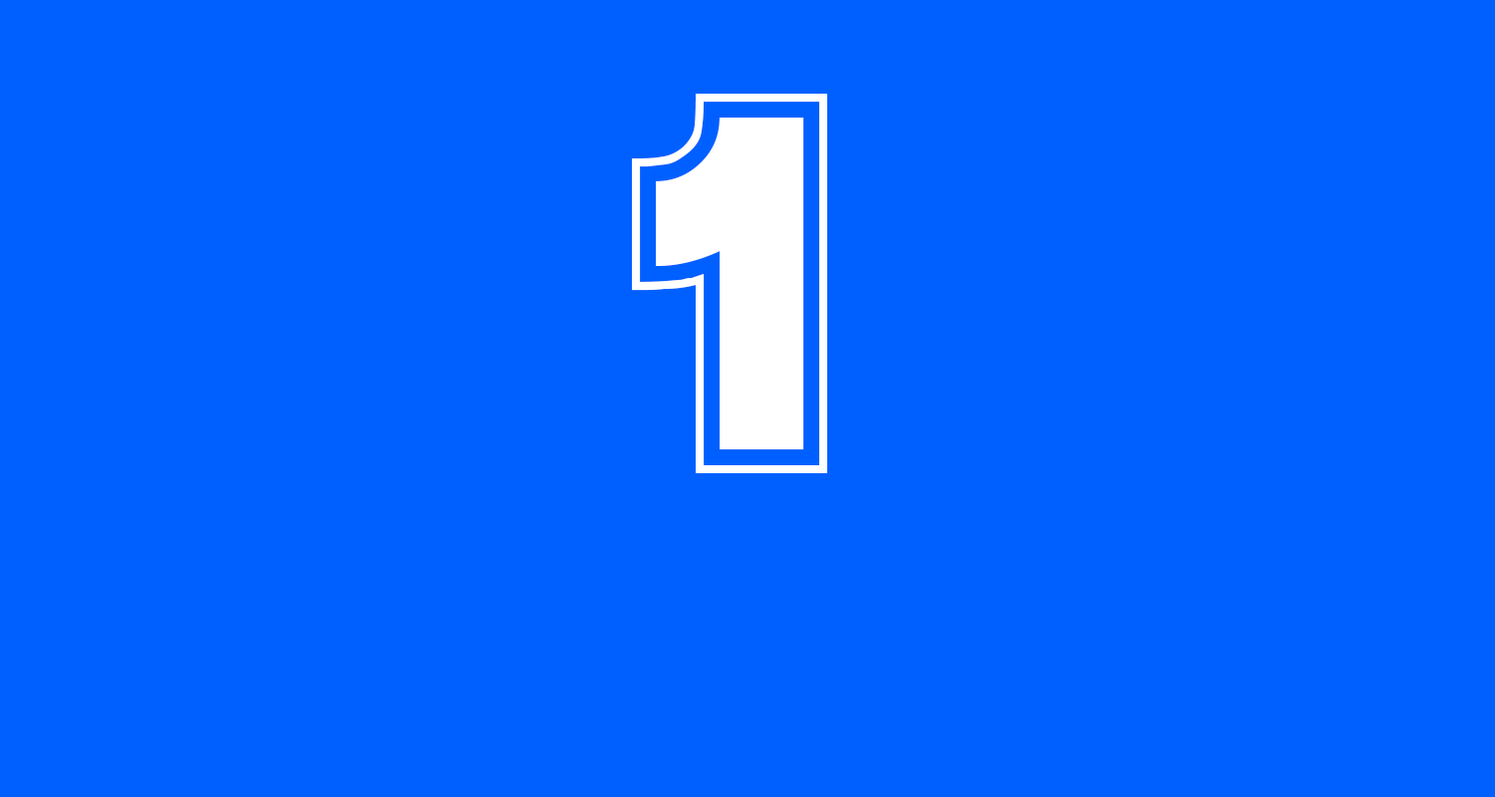
<style>
.page{position:relative;width:1495px;height:797px;background:#0060ff}
.page>*{position:absolute;margin:0}
.t1{font:996.8px "CaptainSwabby";color:#ffffff}
</style>
<div class="page">
<p class="t1" style="left:632px;top:94px;width:195px;height:379px">1</p>
</div>
